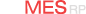
<style>
.page{position:relative;width:86px;height:14px;background:#ffffff}
.page>*{position:absolute;margin:0}
.t1{font:18.2px "Swiss721BT-RomanExtended";color:#f04141;scale:0.95 1}
.t2{font:18.2px "Swiss721BT-RomanExtended";color:#ffffff;scale:0.95 1}
.t3{font:11.9px "Swiss721BT-RomanExtended";color:#dedddd;scale:0.95 1}
</style>
<div class="page">
<p class="t1" style="left:0px;top:0px;width:86px;height:15px"><span class="t2">HF</span>MES <span class="t3">RP</span></p>
</div>
